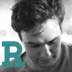
<style>
.page{position:relative;width:72px;height:72px}
.page>*{position:absolute;margin:0}
.t1{font:36.8px "Homestead-Regular";color:#368b8f}
</style>
<div class="page">
<p class="t1" style="left:2px;top:41px;width:23px;height:26px">R</p>
</div>
